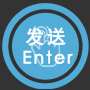
<style>
.page{position:relative;width:90px;height:90px;background:#52acd8}
.page>*{position:absolute;margin:0}
.t1{font:19px "STXihei";letter-spacing:0.1em;color:#ffffff;font-weight:bold}
.t2{font:17px "STXihei";letter-spacing:0.1em;color:#ffffff;font-weight:bold}
</style>
<div class="page">
<p class="t1" style="left:26px;top:27px;width:40px;height:19px">发送</p>
<p class="t2" style="left:23px;top:50px;width:50px;height:14px">Enter</p>
</div>
